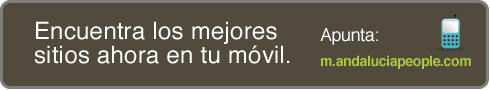
<style>
.page{position:relative;width:490px;height:90px;background:#514b3e}
.page>*{position:absolute;margin:0}
.t1{font:24px/24px "Helvetica";letter-spacing:0.01em;color:#ffffff}
.t2{font:18px "Helvetica";letter-spacing:-0.025em;color:#ffffff}
.t3{font:14px "Helvetica-Bold";letter-spacing:-0.025em;color:#acc83e}
</style>
<div class="page">
<p class="t1" style="left:34px;top:21px;width:256px;height:43px">Encuentra los mejores sitios ahora en tu móvil.</p>
<p class="t2" style="left:320px;top:28px;width:58px;height:17px">Apunta:</p>
<p class="t3" style="left:321px;top:55px;width:150px;height:14px">m.andaluciapeople.com</p>
</div>
